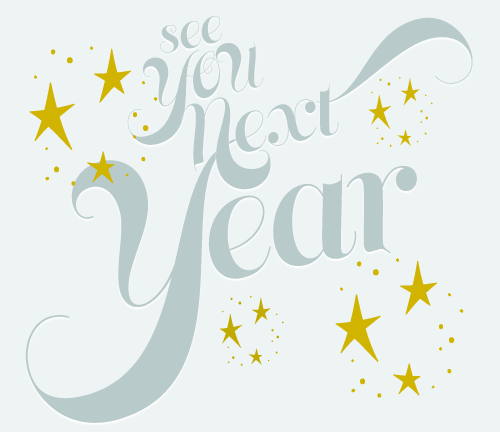
<style>
.page{position:relative;width:500px;height:432px;background:#eef3f3}
.page>*{position:absolute;margin:0}
.t1{font:48px "MemoriamProHeadline";color:#b9cacb}
.t2{font:72px "MemoriamProHeadline";color:#b9cacb}
.t3{font:144px "StudioLettering-Shapes";color:#d0b500}
.t4{font:72px "StudioLettering-Shapes";color:#d0b500}
.t5{font:144px "MemoriamProHeadline";color:#b9cacb}
</style>
<div class="page">
<p class="t1" style="left:160px;top:16px;width:63px;height:37px;rotate:-12deg">see</p>
<p class="t2" style="left:182px;top:17px;width:291px;height:173px;rotate:-12deg">Next</p>
<p class="t3" style="left:29px;top:46px;width:129px;height:140px">'</p>
<p class="t1" style="left:127px;top:42px;width:137px;height:103px;rotate:-12deg">YOU</p>
<p class="t4" style="left:368px;top:77px;width:65px;height:70px">'</p>
<p class="t5" style="left:25px;top:137px;width:392px;height:286px;rotate:-12deg">Year</p>
<p class="t3" style="left:335px;top:258px;width:129px;height:140px">'</p>
<p class="t4" style="left:219px;top:296px;width:65px;height:70px">'</p>
</div>
